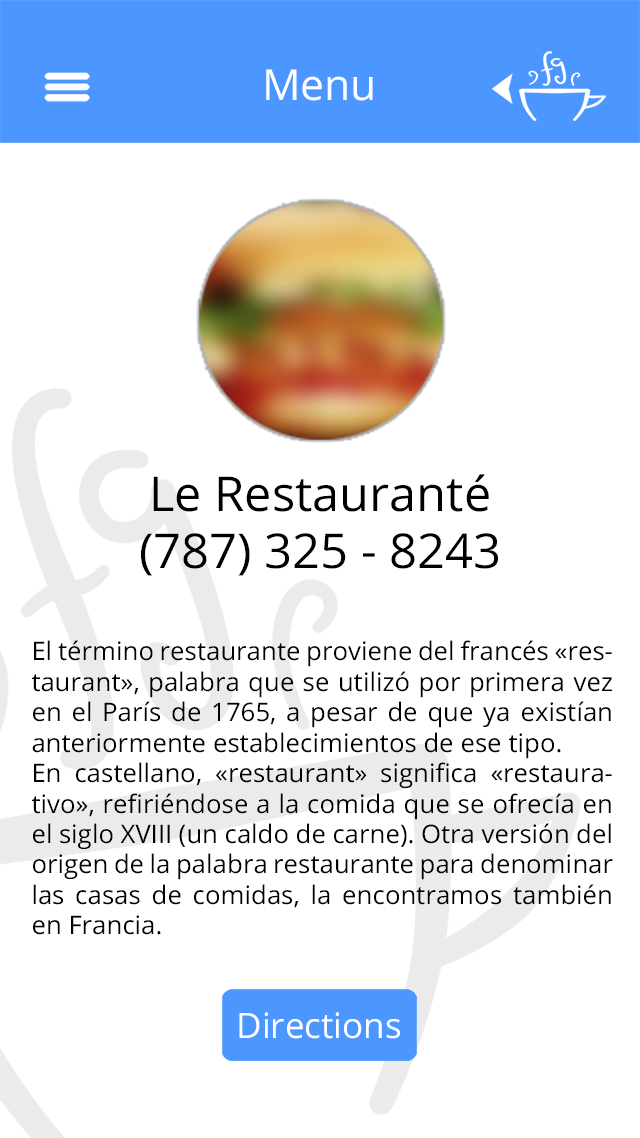
<style>
.page{position:relative;width:640px;height:1138px;background:#ffffff}
.page>*{position:absolute;margin:0}
.t1{font:42.7px "OpenSans";color:#ffffff}
.t2{font:48px "OpenSans";color:#000000}
.t3{font:25.4px "OpenSans";color:#000000}
.t4{font:35px "OpenSans";color:#ffffff}
</style>
<div class="page">
<p class="t1" style="left:266px;top:69px;width:107px;height:32px">Menu</p>
<p class="t2" style="left:141px;top:474px;width:357px;height:102px;text-align:center">Le Restauranté<br>(787) 325 - 8243</p>
<p class="t3" style="left:32px;top:640px;width:581px;height:295px;text-align:justify">El término restaurante proviene del francés «restaurant», palabra que se utilizó por primera vez en el París de 1765, a pesar de que ya existían anteriormente establecimientos de ese tipo.<br>En castellano, «restaurant» significa «restaurativo», refiriéndose a la comida que se ofrecía en el siglo XVIII (un caldo de carne). Otra versión del origen de la palabra restaurante para denominar las casas de comidas, la encontramos también en Francia.</p>
<p class="t4" style="left:239px;top:1012px;width:161px;height:27px">Directions</p>
</div>
